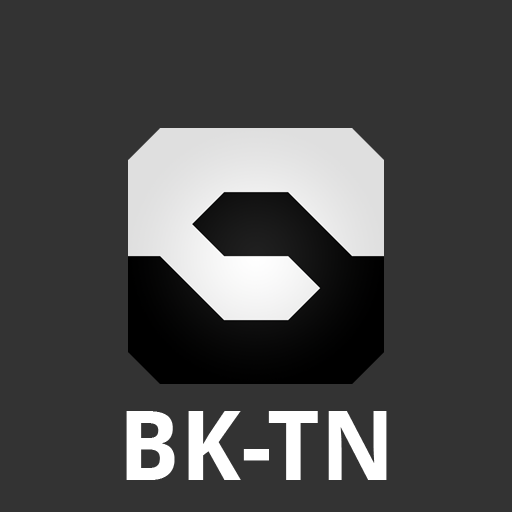
<style>
.page{position:relative;width:512px;height:512px;background:#333333}
.page>*{position:absolute;margin:0}
.t1{font:96px "DroidSans-Bold";color:#ffffff}
</style>
<div class="page">
<p class="t1" style="left:126px;top:411px;width:261px;height:69px">BK-TN</p>
</div>
